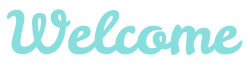
<style>
.page{position:relative;width:250px;height:66px;background:#ffffff}
.page>*{position:absolute;margin:0}
.t1{font:59px "LeckerliOne-Regular";color:#88dddd}
</style>
<div class="page">
<p class="t1" style="left:7px;top:9px;width:236px;height:46px">Welcome</p>
</div>
